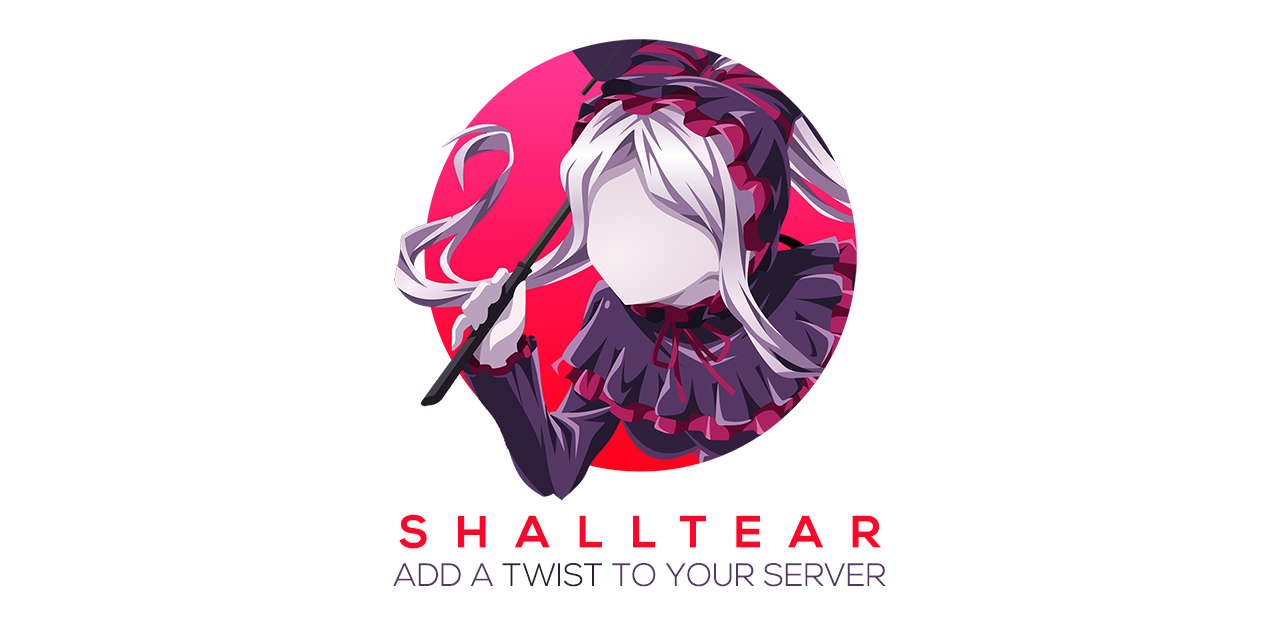
<style>
.page{position:relative;width:1280px;height:618px;background:#ffffff}
.page>*{position:absolute;margin:0}
.t1{font:32px "NexaLight";color:#553764;text-transform:uppercase}
.t2{font:45px "NexaBold";letter-spacing:0.6em;color:#ff052b}
.t3{font:32px "NexaLight";color:#2e1e39;text-transform:uppercase}
</style>
<div class="page">
<p class="t1" style="left:393px;top:514px;width:493px;height:73px;text-align:center"><span class="t2">SHALLTEAR<br></span>Add a <span class="t3">twist </span>to your server</p>
</div>
